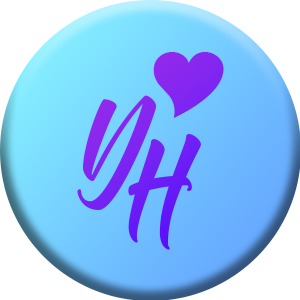
<style>
.page{position:relative;width:300px;height:300px;background:#ffffff}
.page>*{position:absolute;margin:0}
.t1{font:150px "TheBreakdown";color:#8426f0}
.t2{font:150px "TheBreakdown";color:#6c1df6}
</style>
<div class="page">
<p class="t1" style="left:77px;top:95px;width:80px;height:115px">Y</p>
<p class="t2" style="left:128px;top:134px;width:73px;height:116px">H</p>
</div>
